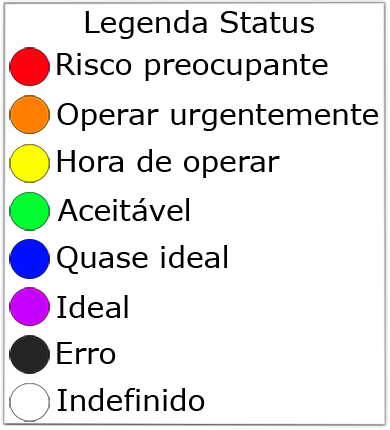
<style>
.page{position:relative;width:390px;height:430px;background:#ffffff}
.page>*{position:absolute;margin:0}
.t1{font:28.7px "Verdana";color:#000000;scale:1.04 1}
</style>
<div class="page">
<p class="t1" style="left:85px;top:10px;width:229px;height:29px">Legenda Status</p>
<p class="t1" style="left:57px;top:53px;width:271px;height:28px">Risco preocupante</p>
<p class="t1" style="left:57px;top:103px;width:321px;height:28px">Operar urgentemente</p>
<p class="t1" style="left:57px;top:149px;width:223px;height:29px">Hora de operar</p>
<p class="t1" style="left:57px;top:198px;width:132px;height:23px">Aceitável</p>
<p class="t1" style="left:57px;top:245px;width:170px;height:29px">Quase ideal</p>
<p class="t1" style="left:57px;top:295px;width:71px;height:23px">Ideal</p>
<p class="t1" style="left:57px;top:342px;width:59px;height:22px">Erro</p>
<p class="t1" style="left:58px;top:388px;width:147px;height:23px">Indefinido</p>
</div>
